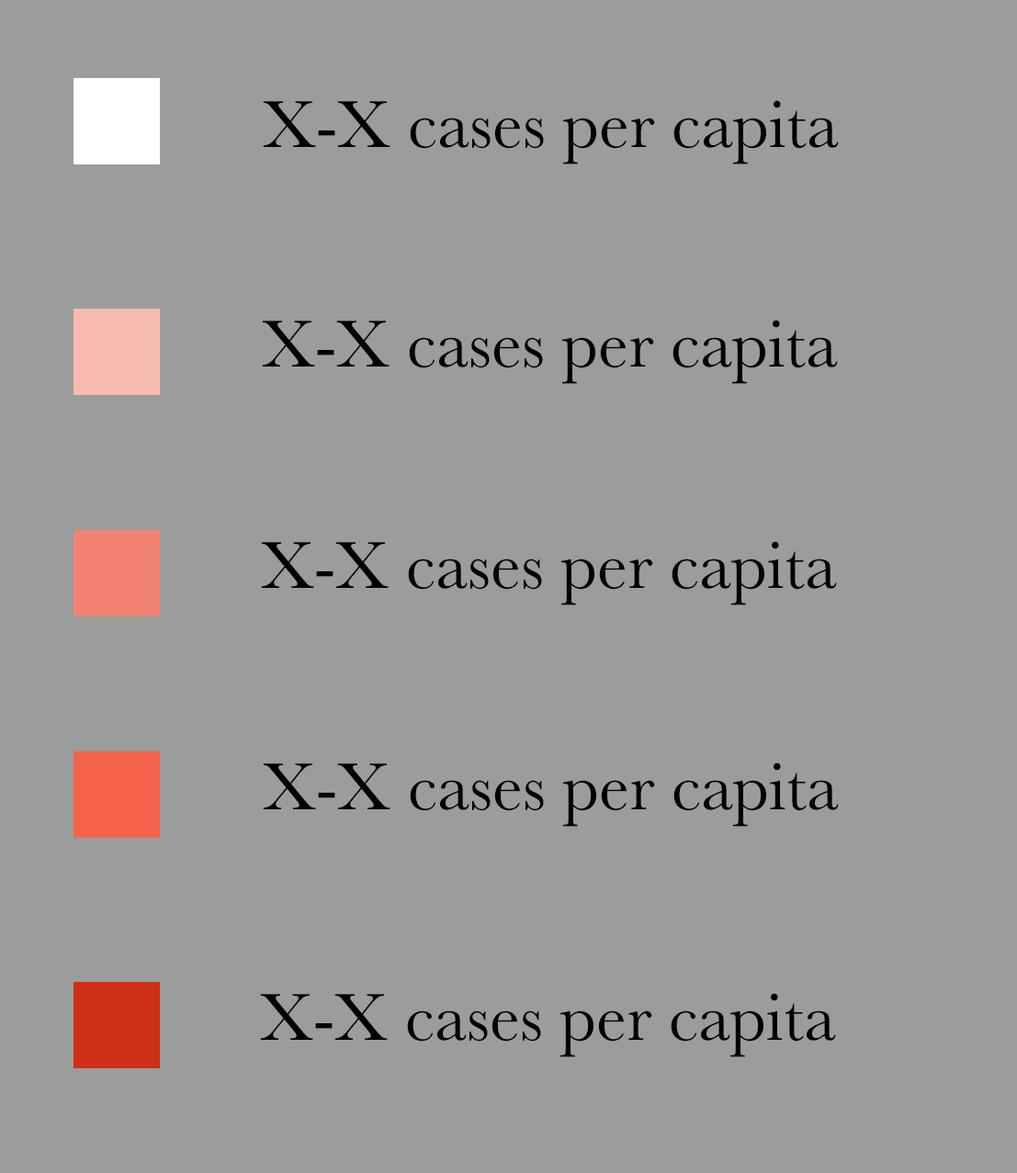
<style>
.page{position:relative;width:1017px;height:1173px;background:#9b9c9c}
.page>*{position:absolute;margin:0}
.t1{font:68.9px "Baskerville";color:#000000}
</style>
<div class="page">
<p class="t1" style="left:263px;top:100px;width:576px;height:64px">X-X cases per capita</p>
<p class="t1" style="left:262px;top:320px;width:576px;height:64px">X-X cases per capita</p>
<p class="t1" style="left:261px;top:541px;width:576px;height:64px">X-X cases per capita</p>
<p class="t1" style="left:263px;top:762px;width:576px;height:65px">X-X cases per capita</p>
<p class="t1" style="left:260px;top:993px;width:576px;height:64px">X-X cases per capita</p>
</div>
